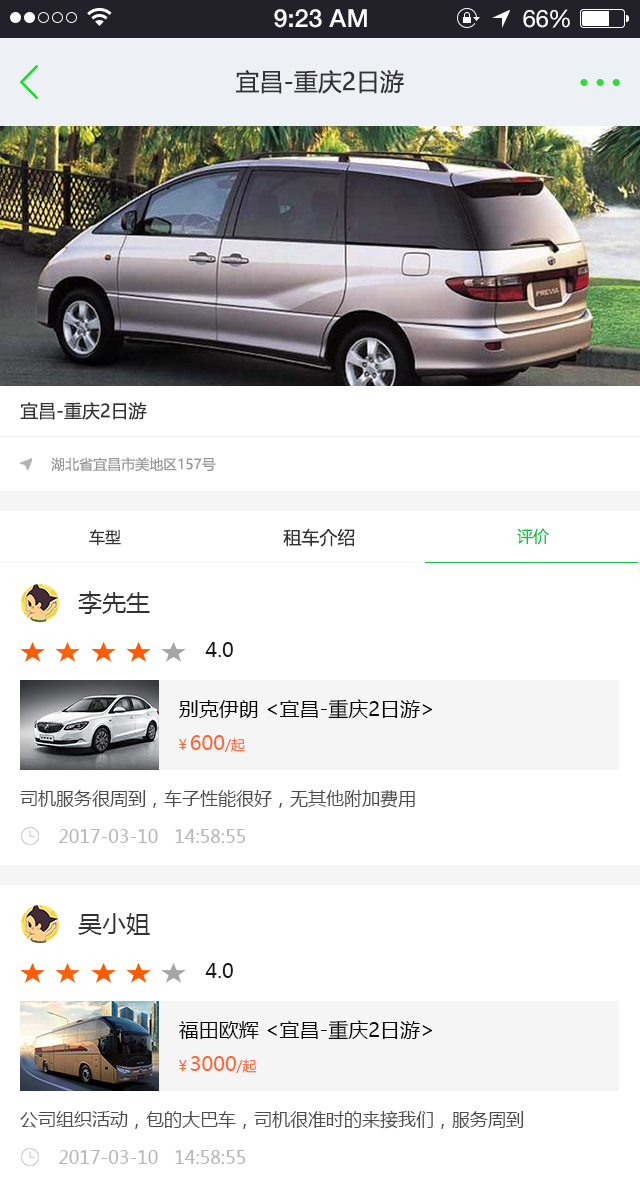
<style>
.page{position:relative;width:640px;height:1190px;background:#ffffff}
.page>*{position:absolute;margin:0}
.t1{font:25px "HelveticaNeue-Medium";color:#ffffff}
.t2{font:24px "HelveticaNeue";color:#ffffff}
.t3{font:24px "HelveticaNeue";letter-spacing:-0.02em;color:#ffffff}
.t4{font:24px "MicrosoftYaHei";color:#333333}
.t5{font:18px "MicrosoftYaHei";color:#333333}
.t6{font:14px "MicrosoftYaHei";color:#999999}
.t7{font:16px "MicrosoftYaHei";color:#333333}
.t8{font:16px "MicrosoftYaHei";color:#14c249}
.t9{font:20px "MicrosoftYaHei";color:#181818}
.t10{font:20px "MicrosoftYaHei";color:#080808}
.t11{font:20px "MicrosoftYaHei";color:#ff6633}
.t12{font:14px "MicrosoftYaHei";color:#ff6633}
.t13{font:18px "MicrosoftYaHei";color:#4c4c4c}
.t14{font:18px "MicrosoftYaHei";color:#b8b7b7}
</style>
<div class="page">
<p class="t1" style="left:274px;top:9px;width:93px;height:19px">9:23 AM</p>
<p class="t2" style="left:523px;top:9px;width:47px;height:19px">6<span class="t3">6</span>%</p>
<p class="t4" style="left:236px;top:70px;width:168px;height:24px">宜昌-重庆2日游</p>
<p class="t5" style="left:20px;top:402px;width:127px;height:18px">宜昌-重庆2日游</p>
<p class="t6" style="left:51px;top:457px;width:165px;height:15px">湖北省宜昌市美地区157号</p>
<p class="t7" style="left:89px;top:529px;width:32px;height:17px">车型</p>
<p class="t5" style="left:283px;top:528px;width:72px;height:19px">租车介绍</p>
<p class="t8" style="left:517px;top:528px;width:32px;height:17px">评价</p>
<p class="t4" style="left:78px;top:591px;width:72px;height:23px">李先生</p>
<p class="t9" style="left:205px;top:642px;width:28px;height:15px">4.0</p>
<p class="t10" style="left:179px;top:699px;width:254px;height:20px">别克伊朗 &lt;宜昌-重庆2日游&gt;</p>
<p class="t11" style="left:179px;top:735px;width:66px;height:17px"><span class="t12">￥</span>600<span class="t12">/起</span></p>
<p class="t13" style="left:20px;top:790px;width:395px;height:18px">司机服务很周到，车子性能很好，无其他附加费用</p>
<p class="t14" style="left:59px;top:829px;width:187px;height:14px">2017-03-10   14:58:55</p>
<p class="t4" style="left:78px;top:913px;width:72px;height:22px">吴小姐</p>
<p class="t9" style="left:205px;top:963px;width:28px;height:15px">4.0</p>
<p class="t10" style="left:179px;top:1020px;width:254px;height:20px">福田欧辉 &lt;宜昌-重庆2日游&gt;</p>
<p class="t11" style="left:179px;top:1056px;width:78px;height:17px"><span class="t12">￥</span>3000<span class="t12">/起</span></p>
<p class="t13" style="left:20px;top:1110px;width:504px;height:19px">公司组织活动，包的大巴车，司机很准时的来接我们，服务周到</p>
<p class="t14" style="left:59px;top:1150px;width:187px;height:14px">2017-03-10   14:58:55</p>
</div>
